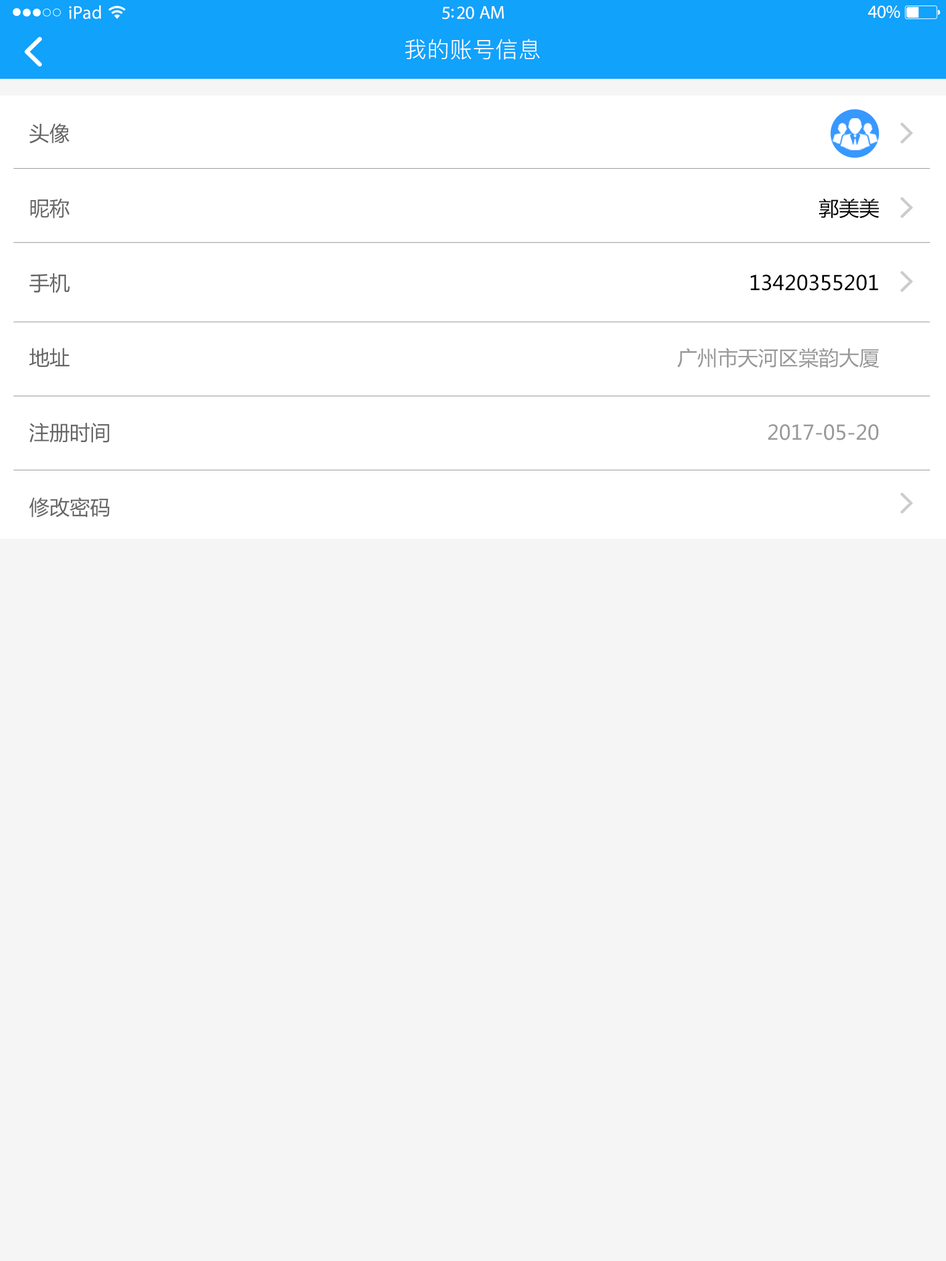
<style>
.page{position:relative;width:946px;height:1261px;background:#f5f5f5}
.page>*{position:absolute;margin:0}
.t1{font:18.5px "MyriadPro-Regular";letter-spacing:0.02em;color:#ffffff}
.t2{font:18.5px "MyriadPro-Regular";letter-spacing:-0.02em;color:#ffffff}
.t3{font:22.2px "PingFang-SC-Regular";letter-spacing:0.03em;color:#ffffff}
.t4{font:20.3px/74.8px "MicrosoftYaHei";color:#666666}
.t5{font:20.2px/74.8px "MicrosoftYaHei";color:#999999}
.t6{font:20.2px/74.8px "MicrosoftYaHei";color:#000000}
</style>
<div class="page">
<p class="t1" style="left:69px;top:5px;width:32px;height:14px">iPad</p>
<p class="t2" style="left:867px;top:6px;width:33px;height:12px">40%</p>
<p class="t2" style="left:442px;top:6px;width:62px;height:13px">5:20 AM</p>
<p class="t3" style="left:405px;top:39px;width:135px;height:21px">我的账号信息</p>
<p class="t4" style="left:29px;top:123px;width:81px;height:394px">头像<br>昵称<br>手机<br>地址<br>注册时间<br>修改密码</p>
<p class="t5" style="left:677px;top:198px;width:202px;height:242px;text-align:right"><span class="t6"><br>郭美美<br>13420355201<br></span>广州市天河区棠韵大厦<br>2017-05-20</p>
</div>
